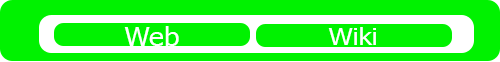
<style>
.page{position:relative;width:500px;height:62px;background:#00f200}
.page>*{position:absolute;margin:0}
.t1{font:25.6px "Tahoma";color:#ffffff;scale:1.11 1}
.t2{font:23.1px "Tahoma";color:#ffffff;scale:1.15 1}
</style>
<div class="page">
<p class="t1" style="left:124px;top:26px;width:55px;height:20px">Web</p>
<p class="t2" style="left:328px;top:27px;width:48px;height:18px">Wiki</p>
</div>
